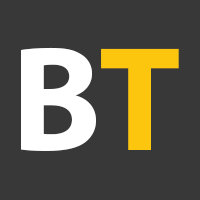
<style>
.page{position:relative;width:200px;height:200px;background:#393838}
.page>*{position:absolute;margin:0}
.t1{font:150px "MyriadPro-Bold";color:#ffffff}
.t2{font:150px "MyriadPro-Bold";color:#fcc60e}
</style>
<div class="page">
<p class="t1" style="left:21px;top:47px;width:158px;height:104px">B<span class="t2">T</span></p>
</div>
